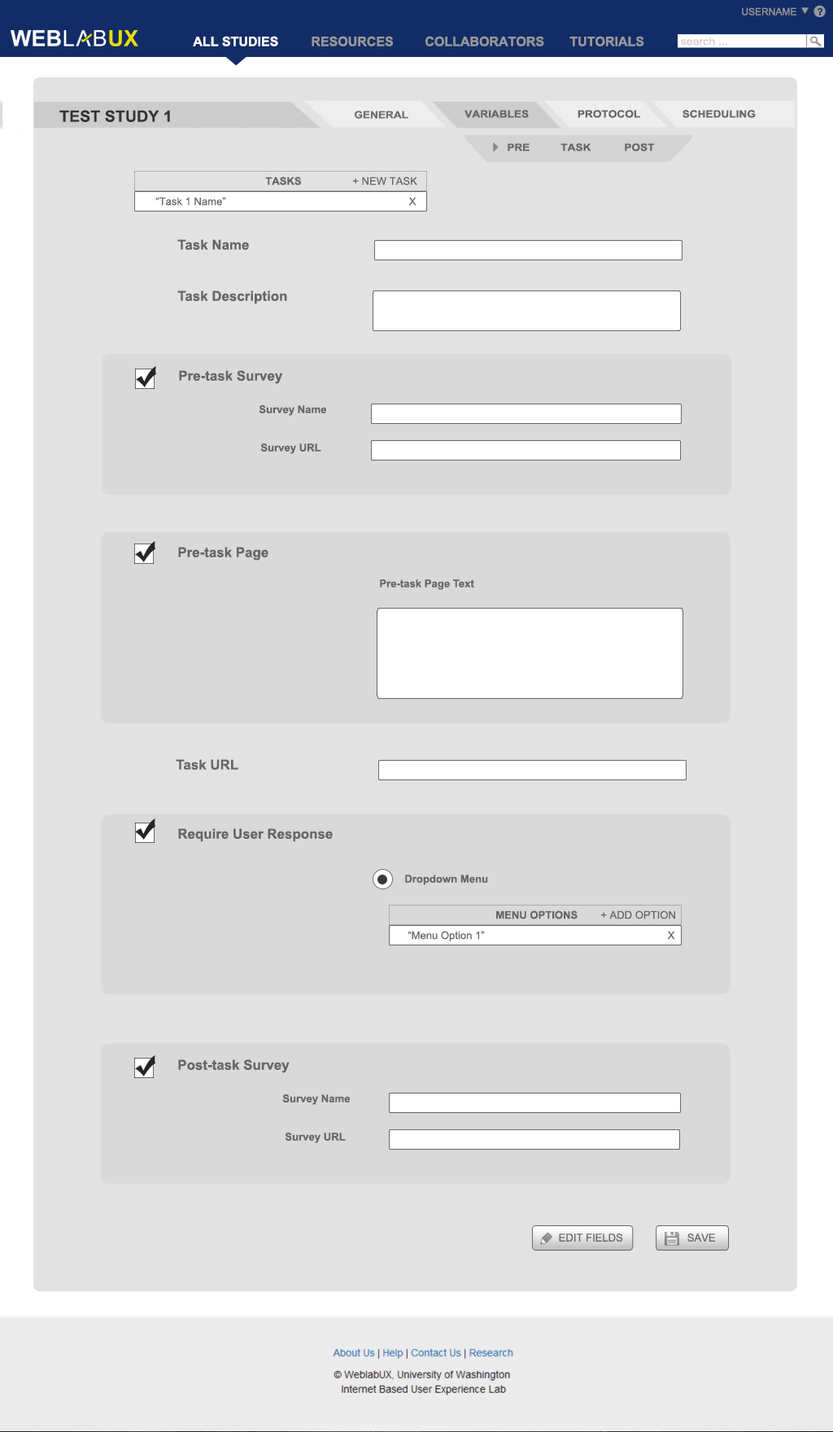
<style>
.page{position:relative;width:833px;height:1432px;background:#e2e2e2}
.page>*{position:absolute;margin:0}
.t1{font:9.8px "ArialMT";color:#999999}
.t2{font:9.8px "Arial-BoldMT";color:#122c67}
.t3{font:13px "Arial-BoldMT";color:#ffffff}
.t4{font:13px "Arial-BoldMT";color:#999999}
.t5{font:13px "Arial-BoldMT";color:#989898}
.t6{font:10.5px "ArialMT";color:#cccccc;scale:1.1 1}
.t7{font:15.7px "Arial-BoldMT";color:#353535}
.t8{font:10.1px "Arial-BoldMT";color:#6d6d6d;scale:1.1 1}
.t9{font:10.1px "Arial-BoldMT";color:#666666;scale:1.1 1}
.t10{font:10.6px "Arial-BoldMT";color:#666666}
.t11{font:10.6px "ArialMT";color:#666666}
.t12{font:13.7px "Arial-BoldMT";color:#666666}
.t13{font:10.8px "ArialMT";color:#666666}
</style>
<div class="page">
<p class="t1" style="left:742px;top:7px;width:54px;height:8px">USERNAME</p>
<p class="t2" style="left:817px;top:7px;width:6px;height:8px">?</p>
<p class="t3" style="left:193px;top:36px;width:85px;height:10px">ALL STUDIES</p>
<p class="t4" style="left:312px;top:36px;width:81px;height:10px">RESOURCES</p>
<p class="t5" style="left:425px;top:36px;width:119px;height:10px">COLLABORATORS</p>
<p class="t4" style="left:569px;top:36px;width:75px;height:10px">TUTORIALS</p>
<p class="t6" style="left:681px;top:37px;width:46px;height:9px">search ...</p>
<p class="t7" style="left:59px;top:110px;width:111px;height:12px">TEST STUDY 1</p>
<p class="t8" style="left:354px;top:111px;width:54px;height:8px">GENERAL</p>
<p class="t9" style="left:464px;top:110px;width:65px;height:8px">VARIABLES</p>
<p class="t9" style="left:578px;top:110px;width:62px;height:8px">PROTOCOL</p>
<p class="t9" style="left:682px;top:110px;width:74px;height:8px">SCHEDULING</p>
<p class="t9" style="left:508px;top:143px;width:22px;height:8px">PRE</p>
<p class="t9" style="left:560px;top:143px;width:31px;height:8px">TASK</p>
<p class="t9" style="left:625px;top:143px;width:30px;height:8px">POST</p>
<p class="t10" style="left:265px;top:177px;width:36px;height:8px">TASKS</p>
<p class="t11" style="left:353px;top:177px;width:64px;height:8px">+ NEW TASK</p>
<p class="t11" style="left:155px;top:197px;width:261px;height:9px">“Task 1 Name”                                                              X</p>
<p class="t12" style="left:177px;top:239px;width:72px;height:11px">Task Name</p>
<p class="t12" style="left:177px;top:290px;width:110px;height:14px">Task Description</p>
<p class="t12" style="left:179px;top:370px;width:103px;height:14px">Pre-task Survey</p>
<p class="t10" style="left:259px;top:405px;width:67px;height:11px">Survey Name</p>
<p class="t10" style="left:260px;top:443px;width:61px;height:11px">Survey URL</p>
<p class="t12" style="left:178px;top:547px;width:90px;height:13px">Pre-task Page</p>
<p class="t10" style="left:380px;top:579px;width:94px;height:11px">Pre-task Page Text</p>
<p class="t12" style="left:176px;top:759px;width:62px;height:10px">Task URL</p>
<p class="t12" style="left:178px;top:828px;width:155px;height:14px">Require User Response</p>
<p class="t10" style="left:405px;top:874px;width:83px;height:11px">Dropdown Menu</p>
<p class="t10" style="left:496px;top:910px;width:82px;height:9px">MENU OPTIONS</p>
<p class="t11" style="left:601px;top:910px;width:74px;height:9px">+ ADD OPTION</p>
<p class="t11" style="left:408px;top:931px;width:267px;height:10px">“Menu Option 1”                                                              X</p>
<p class="t12" style="left:178px;top:1059px;width:112px;height:14px">Post-task Survey</p>
<p class="t10" style="left:282px;top:1094px;width:68px;height:11px">Survey Name</p>
<p class="t10" style="left:285px;top:1132px;width:61px;height:11px">Survey URL</p>
<p class="t13" style="left:559px;top:1233px;width:64px;height:8px">EDIT FIELDS</p>
<p class="t13" style="left:687px;top:1233px;width:28px;height:8px">SAVE</p>
</div>
